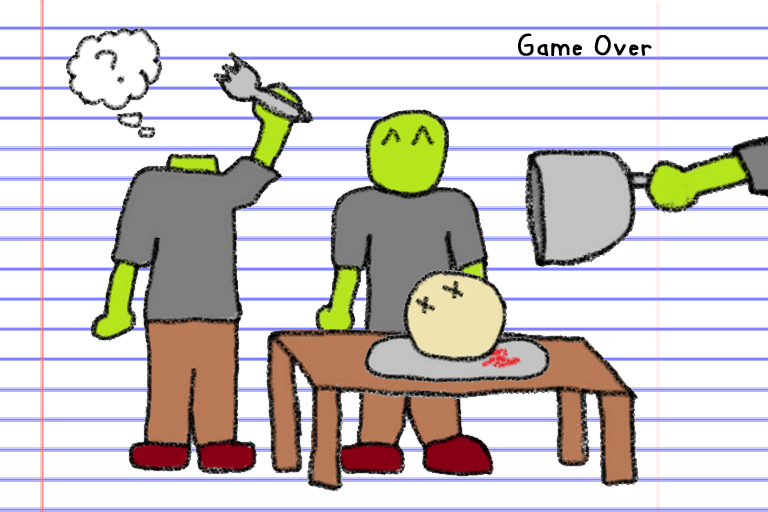
<style>
.page{position:relative;width:768px;height:512px;background:#ffffff}
.page>*{position:absolute;margin:0}
.t1{font:31.9px "Kiddish";color:#000000;font-weight:bold}
</style>
<div class="page">
<p class="t1" style="left:518px;top:33px;width:134px;height:23px">Game Over</p>
</div>
